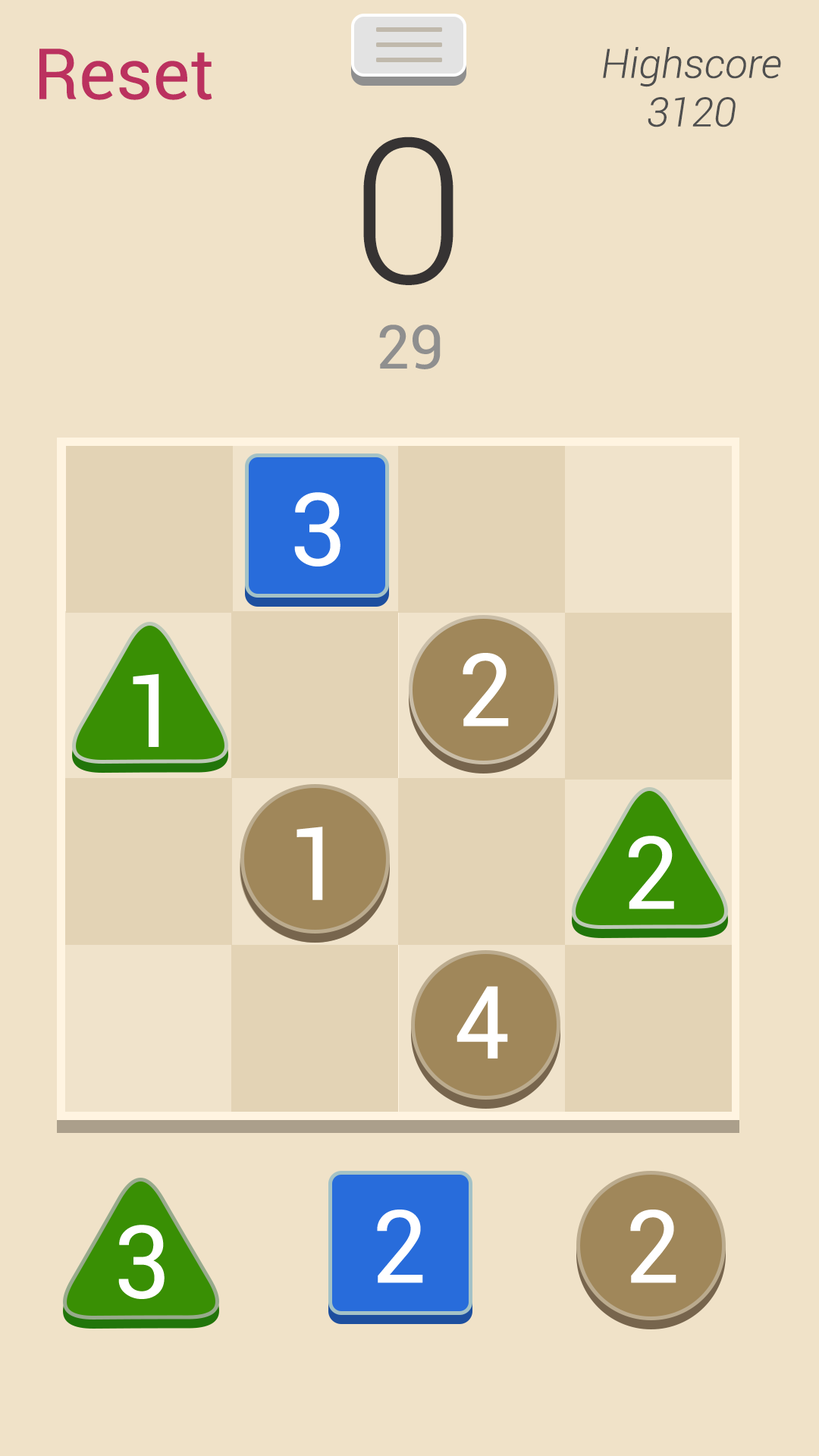
<style>
.page{position:relative;width:819px;height:1456px;background:#f0e2c8}
.page>*{position:absolute;margin:0}
.t1{font:70.8px "Roboto-Regular";color:#bb315f}
.t2{font:40.4px "Roboto-LightItalic";color:#4f4f4f}
.t3{font:202.2px "Roboto-Light";color:#363333}
.t4{font:60.7px "Roboto-Regular";color:#8f8f8f}
.t5{font:101.1px "Roboto-Regular";color:#ffffff}
</style>
<div class="page">
<p class="t1" style="left:39px;top:49px;width:173px;height:51px">Reset</p>
<p class="t2" style="left:603px;top:47px;width:178px;height:80px;text-align:center">Highscore<br>3120</p>
<p class="t3" style="left:363px;top:136px;width:90px;height:149px">0</p>
<p class="t4" style="left:379px;top:325px;width:62px;height:44px">29</p>
<p class="t5" style="left:294px;top:492px;width:46px;height:74px">3</p>
<p class="t5" style="left:463px;top:653px;width:46px;height:73px">2</p>
<p class="t5" style="left:133px;top:673px;width:26px;height:74px">1</p>
<p class="t5" style="left:297px;top:827px;width:26px;height:73px">1</p>
<p class="t5" style="left:629px;top:836px;width:45px;height:73px">2</p>
<p class="t5" style="left:457px;top:986px;width:51px;height:73px">4</p>
<p class="t5" style="left:377px;top:1210px;width:46px;height:73px">2</p>
<p class="t5" style="left:630px;top:1210px;width:46px;height:73px">2</p>
<p class="t5" style="left:118px;top:1225px;width:47px;height:74px">3</p>
</div>
